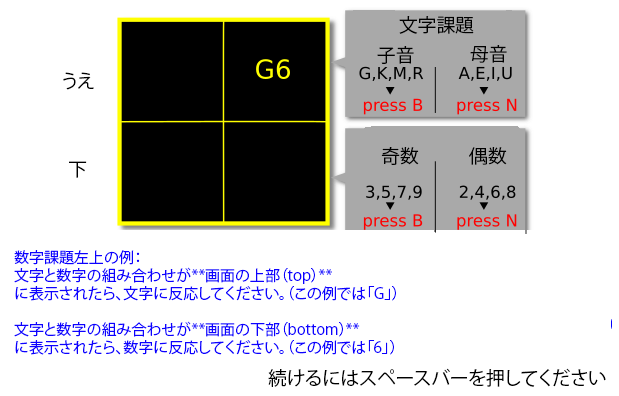
<style>
.page{position:relative;width:619px;height:396px;background:#ffffff}
.page>*{position:absolute;margin:0}
.t1{font:18.8px "KozGoPr6N-Regular";color:#000000}
.t2{font:15px "KozGoPr6N-Regular";color:#0d01ff}
</style>
<div class="page">
<p class="t1" style="left:399px;top:16px;width:75px;height:18px">文字課題</p>
<p class="t1" style="left:377px;top:46px;width:37px;height:18px">子音</p>
<p class="t1" style="left:470px;top:45px;width:37px;height:18px">母音</p>
<p class="t1" style="left:63px;top:72px;width:31px;height:18px">うえ</p>
<p class="t1" style="left:381px;top:147px;width:38px;height:18px">奇数</p>
<p class="t1" style="left:469px;top:147px;width:38px;height:18px">偶数</p>
<p class="t1" style="left:69px;top:161px;width:18px;height:17px">下</p>
<p class="t2" style="left:14px;top:250px;width:382px;height:105px">数字課題左上の例：<br>文字と数字の組み合わせが**画面の上部（top）**<br>に表示されたら、文字に反応してください。（この例では「G」）<br><br>文字と数字の組み合わせが**画面の下部（bottom）**<br>に表示されたら、数字に反応してください。（この例では「6」）</p>
<p class="t1" style="left:268px;top:368px;width:338px;height:19px">続けるにはスペースバーを押してください</p>
</div>
